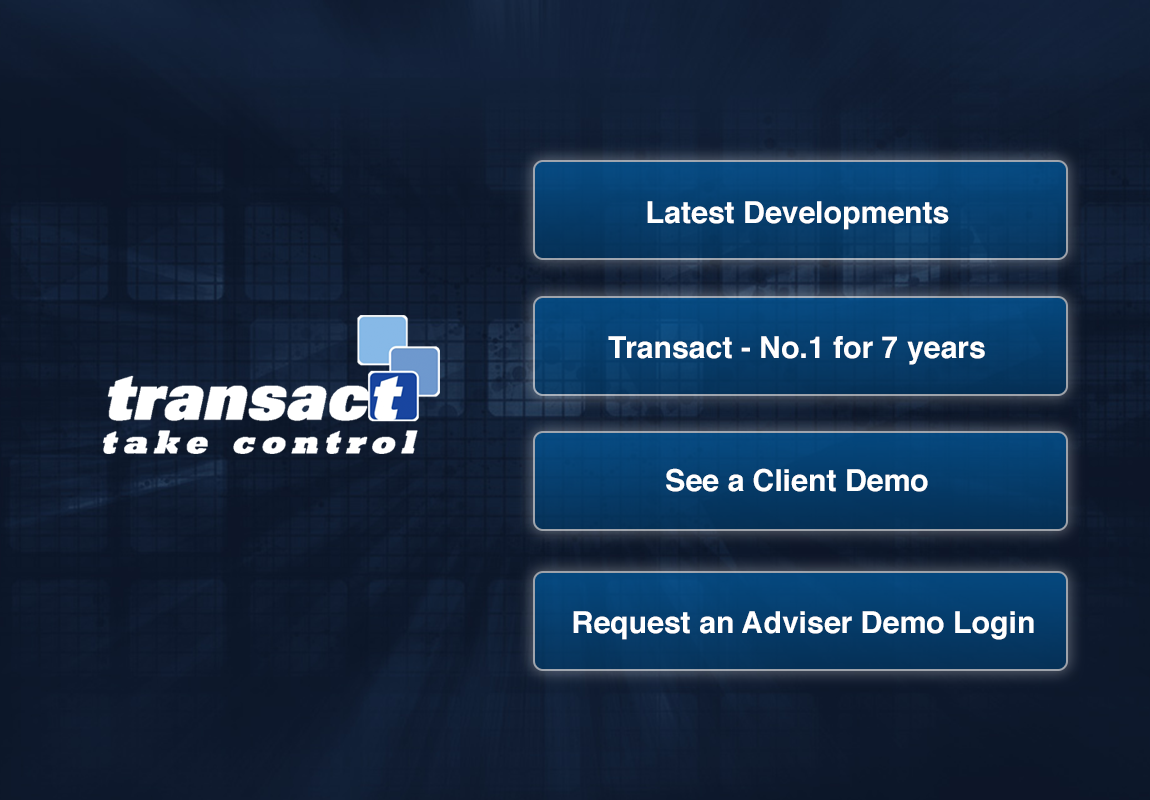
<style>
.page{position:relative;width:1150px;height:800px}
.page>*{position:absolute;margin:0}
.t1{font:30.2px "Helvetica-Bold";color:#ffffff}
</style>
<div class="page">
<p class="t1" style="left:647px;top:201px;width:302px;height:29px">Latest Developments</p>
<p class="t1" style="left:608px;top:336px;width:377px;height:29px">Transact - No.1 for 7 years</p>
<p class="t1" style="left:666px;top:468px;width:262px;height:24px">See a Client Demo</p>
<p class="t1" style="left:573px;top:611px;width:461px;height:29px">Request an Adviser Demo Login</p>
</div>
